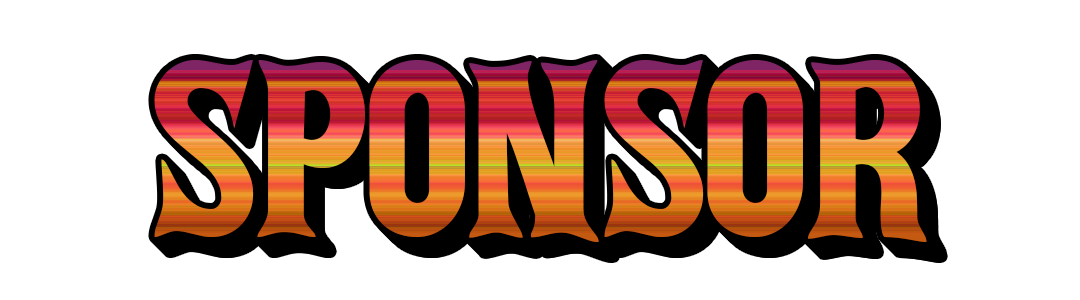
<style>
.page{position:relative;width:1080px;height:300px;background:#ffffff}
.page>*{position:absolute;margin:0}
.t1{font:225.3px "akaPosse"}
</style>
<div class="page">
<p class="t1" style="left:154px;top:60px;width:773px;height:182px">SPONSOR</p>
<p class="t1" style="left:155px;top:61px;width:773px;height:182px">SPONSOR</p>
<p class="t1" style="left:156px;top:62px;width:773px;height:182px">SPONSOR</p>
<p class="t1" style="left:157px;top:63px;width:773px;height:182px">SPONSOR</p>
<p class="t1" style="left:158px;top:64px;width:773px;height:182px">SPONSOR</p>
<p class="t1" style="left:159px;top:65px;width:773px;height:182px">SPONSOR</p>
<p class="t1" style="left:160px;top:66px;width:773px;height:182px">SPONSOR</p>
<p class="t1" style="left:161px;top:67px;width:773px;height:182px">SPONSOR</p>
</div>
